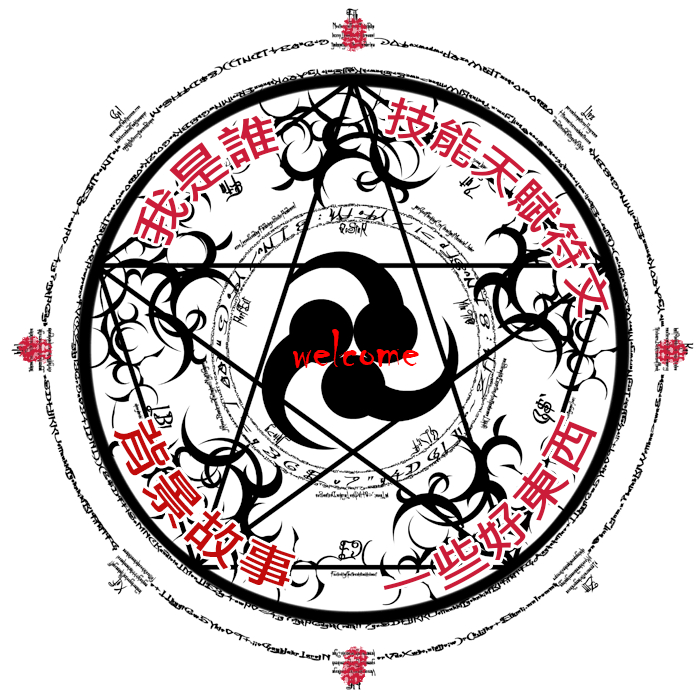
<style>
.page{position:relative;width:700px;height:700px;background:#ffffff}
.page>*{position:absolute;margin:0}
.t1{font:44.4px "MicrosoftJhengHeiBold";color:#cb1c39}
.t2{font:48px "MicrosoftJhengHeiBold";color:#cb1c39}
.t3{font:55.6px "Chiller-Regular";color:#ff0101}
.t4{font:50px "MicrosoftJhengHeiBold";color:#c10b0b}
</style>
<div class="page">
<p class="t1" style="left:385px;top:97px;width:224px;height:222px;rotate:44deg">技能天賦符文</p>
<p class="t2" style="left:133px;top:115px;width:146px;height:131px;rotate:-41deg">我是誰</p>
<p class="t3" style="left:293px;top:329px;width:126px;height:39px">welcome</p>
<p class="t2" style="left:383px;top:414px;width:215px;height:177px;rotate:-41deg">一些好東西</p>
<p class="t4" style="left:113px;top:419px;width:183px;height:168px;rotate:44deg">背景故事</p>
</div>
